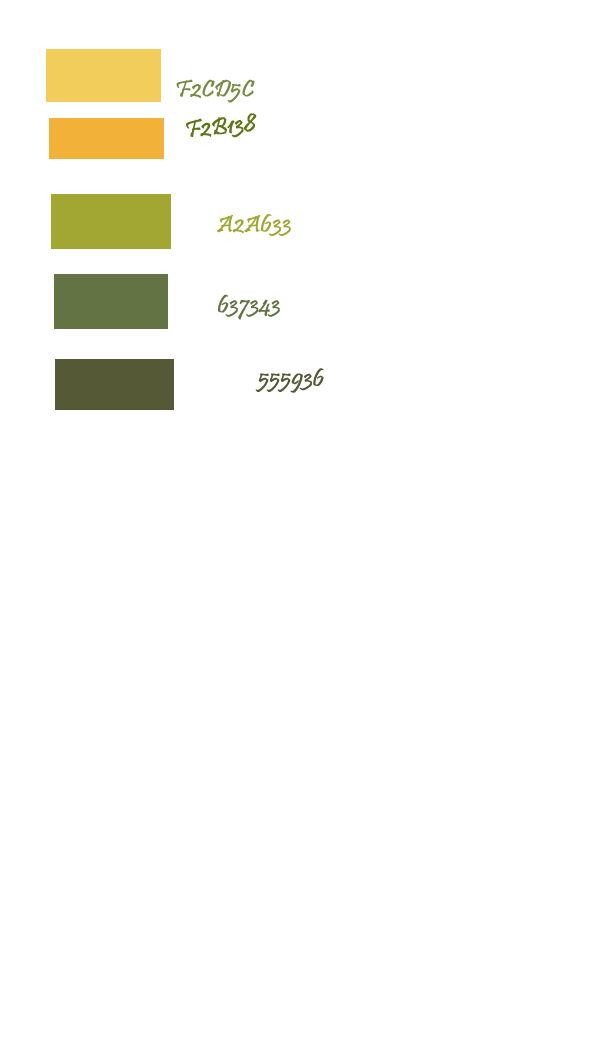
<style>
.page{position:relative;width:600px;height:1040px;background:#ffffff}
.page>*{position:absolute;margin:0}
.t1{font:24px "Pristina-Regular";color:#788a43;font-weight:bold}
.t2{font:24px "Pristina-Regular";color:#5f7516;font-weight:bold}
.t3{font:24px "Pristina-Regular";color:#a2a633;font-weight:bold}
.t4{font:24px "Pristina-Regular";color:#637343;font-weight:bold}
.t5{font:24px "Pristina-Regular";color:#555936;font-weight:bold}
</style>
<div class="page">
<p class="t1" style="left:176px;top:79px;width:79px;height:24px">F2CD5C</p>
<p class="t2" style="left:186px;top:113px;width:71px;height:25px;rotate:-5deg">F2B138</p>
<p class="t3" style="left:217px;top:214px;width:74px;height:22px">A2A633</p>
<p class="t4" style="left:218px;top:294px;width:62px;height:26px">637343</p>
<p class="t5" style="left:255px;top:368px;width:69px;height:25px">555936</p>
</div>
